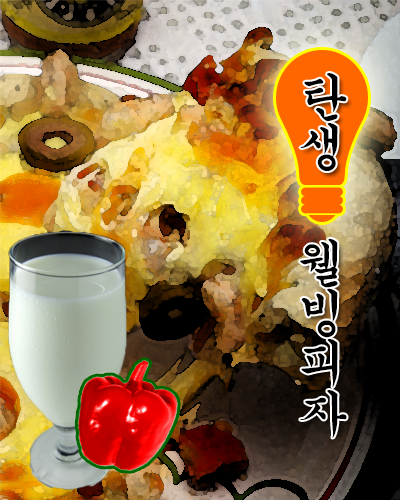
<style>
.page{position:relative;width:400px;height:500px}
.page>*{position:absolute;margin:0}
.t1{font:50px "Gungsuh";color:#000000}
</style>
<div class="page">
<p class="t1" style="left:300px;top:73px;width:47px;height:365px">탄생    웰빙피자</p>
</div>
